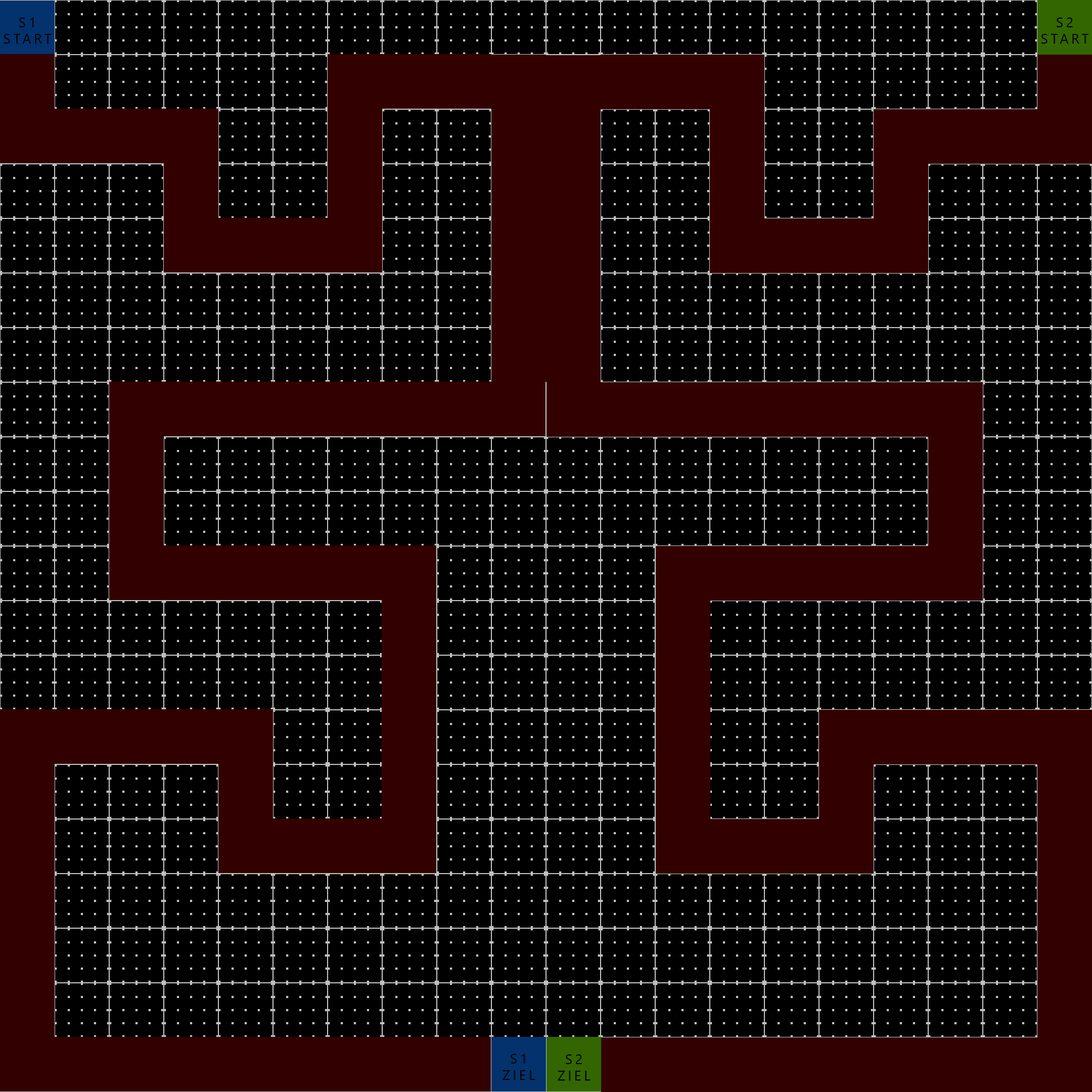
<style>
.page{position:relative;width:1092px;height:1092px;background:#000000}
.page>*{position:absolute;margin:0}
.t1{font:13.6px "SegoeUI";letter-spacing:0.2em;color:#000000}
</style>
<div class="page">
<p class="t1" style="left:4px;top:17px;width:47px;height:27px;text-align:center">S1<br>START</p>
<p class="t1" style="left:1041px;top:17px;width:48px;height:27px;text-align:center">S2<br>START</p>
<p class="t1" style="left:502px;top:1054px;width:33px;height:26px;text-align:center">S1<br>ZIEL</p>
<p class="t1" style="left:557px;top:1054px;width:33px;height:27px;text-align:center">S2<br>ZIEL</p>
</div>
